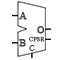
<style>
.page{position:relative;width:60px;height:60px;background:#ffffff}
.page>*{position:absolute;margin:0}
.t1{font:10px "TimesNewRomanPSMT";color:#464646;font-weight:bold}
.t2{font:6px "TimesNewRomanPSMT";color:#464646;font-weight:bold}
.t3{font:8px "TimesNewRomanPSMT";color:#464646;font-weight:bold}
</style>
<div class="page">
<p class="t1" style="left:19px;top:12px;width:8px;height:8px">A</p>
<p class="t1" style="left:37px;top:26px;width:8px;height:8px">O</p>
<p class="t1" style="left:19px;top:39px;width:7px;height:8px">B</p>
<p class="t2" style="left:29px;top:36px;width:16px;height:6px">CPSR</p>
<p class="t3" style="left:29px;top:45px;width:6px;height:6px">C</p>
</div>
